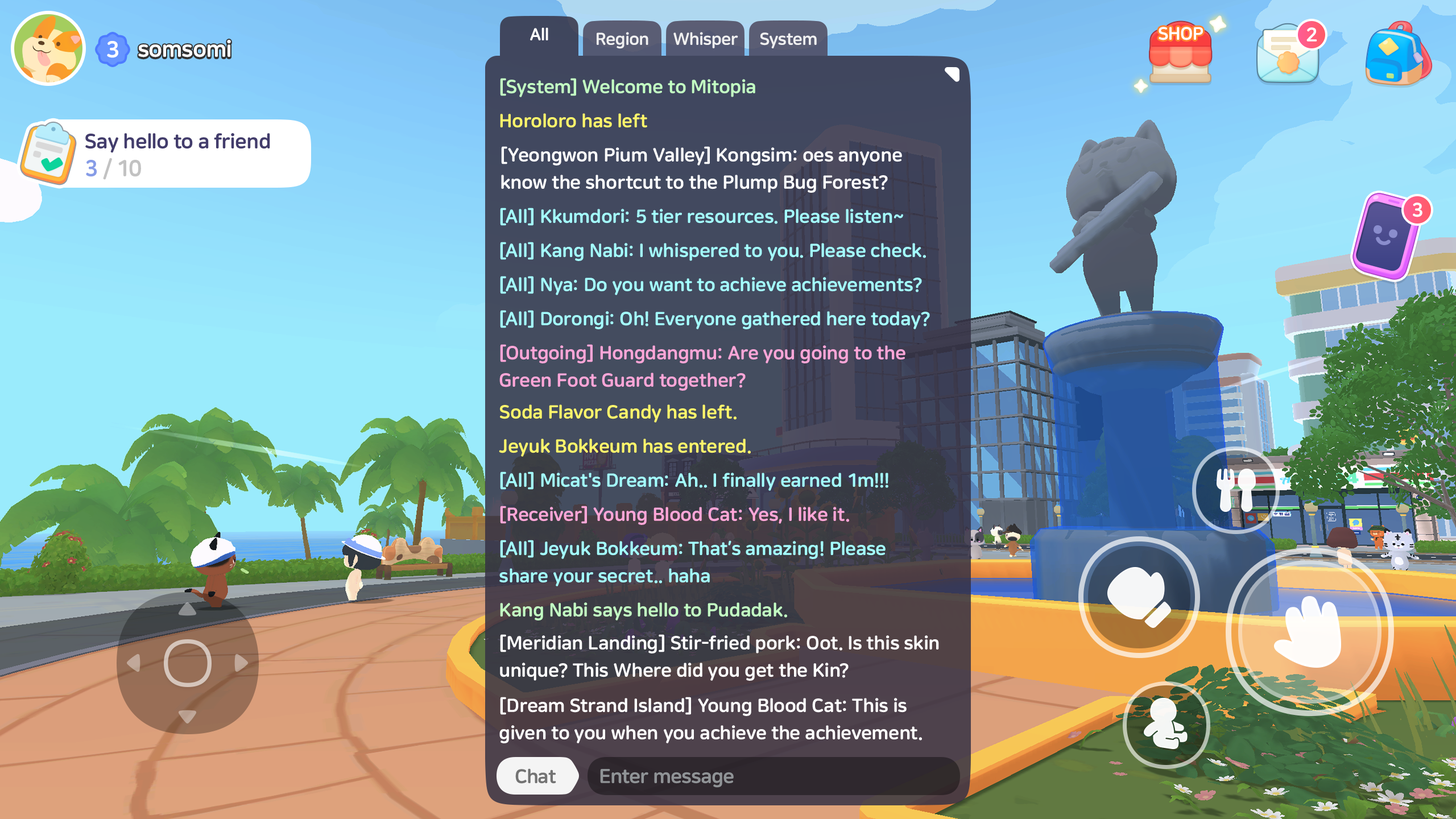
<style>
.page{position:relative;width:1456px;height:819px}
.page>*{position:absolute;margin:0}
.t1{font:17.1px "NanumSquareRoundEB";letter-spacing:-0.025em;color:#ffffff}
.t2{font:17.1px "NanumSquareRoundEB";letter-spacing:-0.025em;color:#f0f0f0}
.t3{font:18.8px "NanumSquareRoundEB";letter-spacing:-0.01em;color:#c3ffc3}
.t4{font:18.8px "NanumSquareRoundEB";letter-spacing:-0.01em;color:#fff66b}
.t5{font:18.8px/27.3px "NanumSquareRoundEB";letter-spacing:-0.01em;color:#ffffff}
.t6{font:18.8px "NanumSquareRoundEB";letter-spacing:-0.01em;color:#a4ffff}
.t7{font:18.8px/27.3px "NanumSquareRoundEB";letter-spacing:-0.01em;color:#ffa6d8}
.t8{font:18.8px "NanumSquareRoundEB";letter-spacing:-0.01em;color:#ffa6d8}
.t9{font:18.8px/27.3px "NanumSquareRoundEB";letter-spacing:-0.01em;color:#a4ffff}
.t10{font:19.3px "NanumSquareRoundEB";letter-spacing:-0.025em;color:#737373}
.t11{font:19.9px "NanumSquareRoundEB";letter-spacing:-0.025em;color:#909497}
</style>
<div class="page">
<p class="t1" style="left:530px;top:27px;width:18px;height:13px">All</p>
<p class="t2" style="left:597px;top:32px;width:51px;height:17px">Region</p>
<p class="t2" style="left:673px;top:32px;width:65px;height:16px">Whisper</p>
<p class="t2" style="left:760px;top:32px;width:57px;height:16px">System</p>
<p class="t3" style="left:500px;top:78px;width:255px;height:19px">[System] Welcome to Mitopia</p>
<p class="t4" style="left:500px;top:113px;width:147px;height:15px">Horoloro has left</p>
<p class="t5" style="left:501px;top:146px;width:401px;height:47px">[Yeongwon Pium Valley] Kongsim: oes anyone<br>know the shortcut to the Plump Bug Forest?</p>
<p class="t6" style="left:500px;top:208px;width:403px;height:18px">[All] Kkumdori: 5 tier resources. Please listen~</p>
<p class="t6" style="left:500px;top:242px;width:426px;height:19px">[All] Kang Nabi: I whispered to you. Please check.</p>
<p class="t6" style="left:500px;top:276px;width:422px;height:19px">[All] Nya: Do you want to achieve achievements?</p>
<p class="t6" style="left:500px;top:310px;width:430px;height:19px">[All] Dorongi: Oh! Everyone gathered here today?</p>
<p class="t7" style="left:499px;top:344px;width:406px;height:47px">[Outgoing] Hongdangmu: Are you going to the<br>Green Foot Guard together?</p>
<p class="t4" style="left:500px;top:404px;width:237px;height:19px">Soda Flavor Candy has left.</p>
<p class="t4" style="left:499px;top:439px;width:252px;height:18px">Jeyuk Bokkeum has entered.</p>
<p class="t6" style="left:500px;top:471px;width:388px;height:20px">[All] Micat's Dream: Ah.. I finally earned 1m!!!</p>
<p class="t8" style="left:500px;top:506px;width:349px;height:19px">[Receiver] Young Blood Cat: Yes, I like it.</p>
<p class="t9" style="left:499px;top:540px;width:387px;height:46px">[All] Jeyuk Bokkeum: That’s amazing! Please <br>share your secret.. haha</p>
<p class="t3" style="left:500px;top:602px;width:287px;height:18px">Kang Nabi says hello to Pudadak.</p>
<p class="t5" style="left:500px;top:634px;width:439px;height:47px">[Meridian Landing] Stir-fried pork: Oot. Is this skin<br>unique? This Where did you get the Kin?</p>
<p class="t5" style="left:499px;top:697px;width:423px;height:46px">[Dream Strand Island] Young Blood Cat: This is <br>given to you when you achieve the achievement.</p>
<p class="t10" style="left:515px;top:768px;width:41px;height:16px">Chat</p>
<p class="t11" style="left:600px;top:769px;width:134px;height:19px">Enter message</p>
</div>
